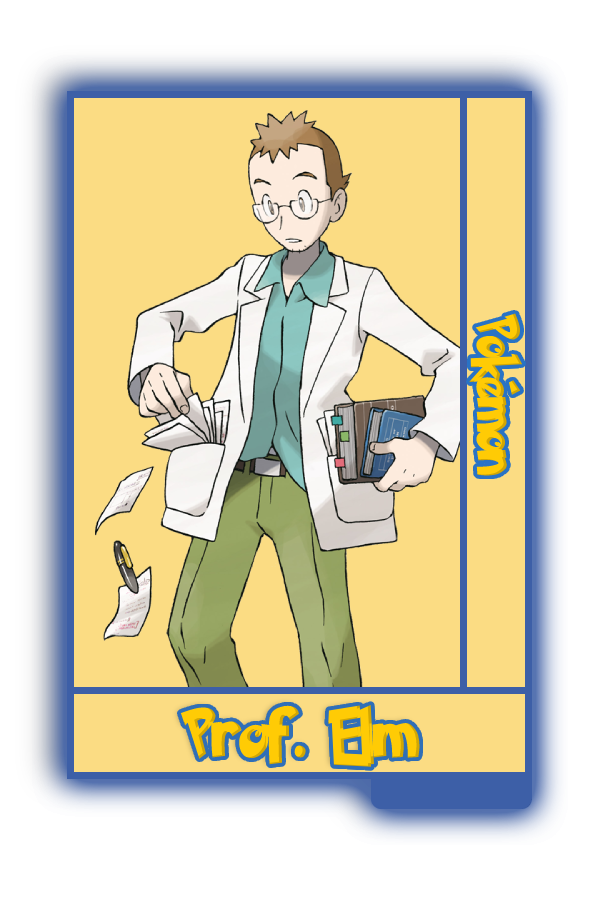
<style>
.page{position:relative;width:600px;height:900px;background:#fbdc83}
.page>*{position:absolute;margin:0}
.t1{font:48.8px "PokemonSolidNormal";color:#ffcb05;scale:0.8 1}
.t2{font:56.6px "PokemonSolidNormal";color:#ffcb05;scale:0.92 1}
</style>
<div class="page">
<p class="t1" style="left:469px;top:313px;width:54px;height:163px;rotate:90deg">Pokémon</p>
<p class="t2" style="left:180px;top:704px;width:240px;height:63px">Prof. Elm</p>
</div>
